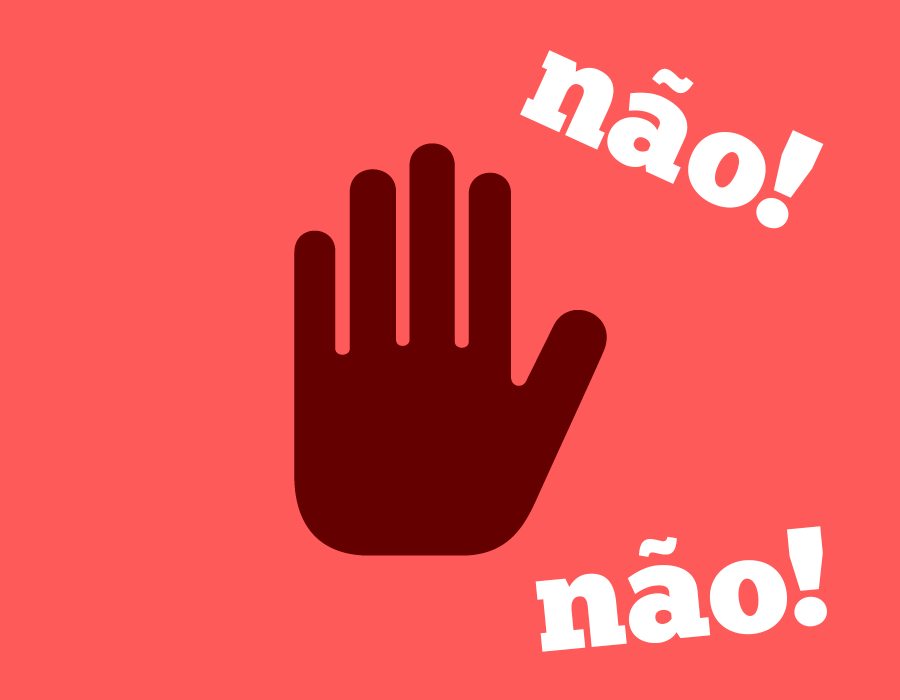
<style>
.page{position:relative;width:900px;height:700px;background:#ff5a5a}
.page>*{position:absolute;margin:0}
.t1{font:141px "ChunkFive-Roman";color:#ffffff}
.t2{font:92.7px "GothamUltra";color:#ffffff}
</style>
<div class="page">
<p class="t1" style="left:520px;top:50px;width:304px;height:179px;rotate:25deg">nao!</p>
<p class="t2" style="left:652px;top:68px;width:42px;height:26px;rotate:25deg">~</p>
<p class="t1" style="left:535px;top:526px;width:292px;height:126px;rotate:-5deg">nao!</p>
<p class="t2" style="left:639px;top:536px;width:38px;height:21px;rotate:-5deg">~</p>
</div>
